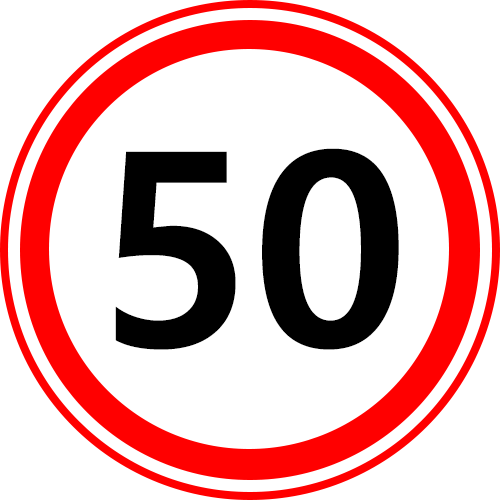
<style>
.page{position:relative;width:500px;height:500px;background:#ffffff}
.page>*{position:absolute;margin:0}
.t1{font:270px "MalgunGothicBold";color:#000000}
</style>
<div class="page">
<p class="t1" style="left:115px;top:148px;width:284px;height:202px">50</p>
</div>
